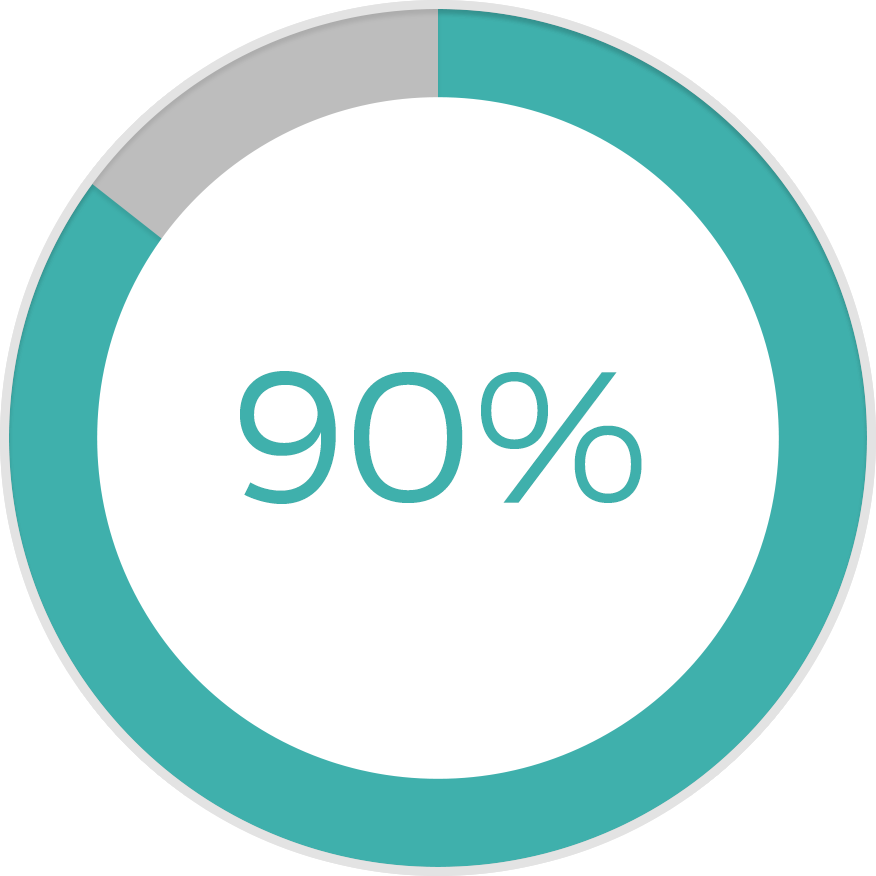
<style>
.page{position:relative;width:876px;height:876px;background:#ffffff}
.page>*{position:absolute;margin:0}
.t1{font:187.4px "Montserrat-Light";color:#3fb0ac}
</style>
<div class="page">
<p class="t1" style="left:240px;top:371px;width:402px;height:133px">90%</p>
<p class="t1" style="left:240px;top:371px;width:402px;height:133px">90%</p>
</div>
